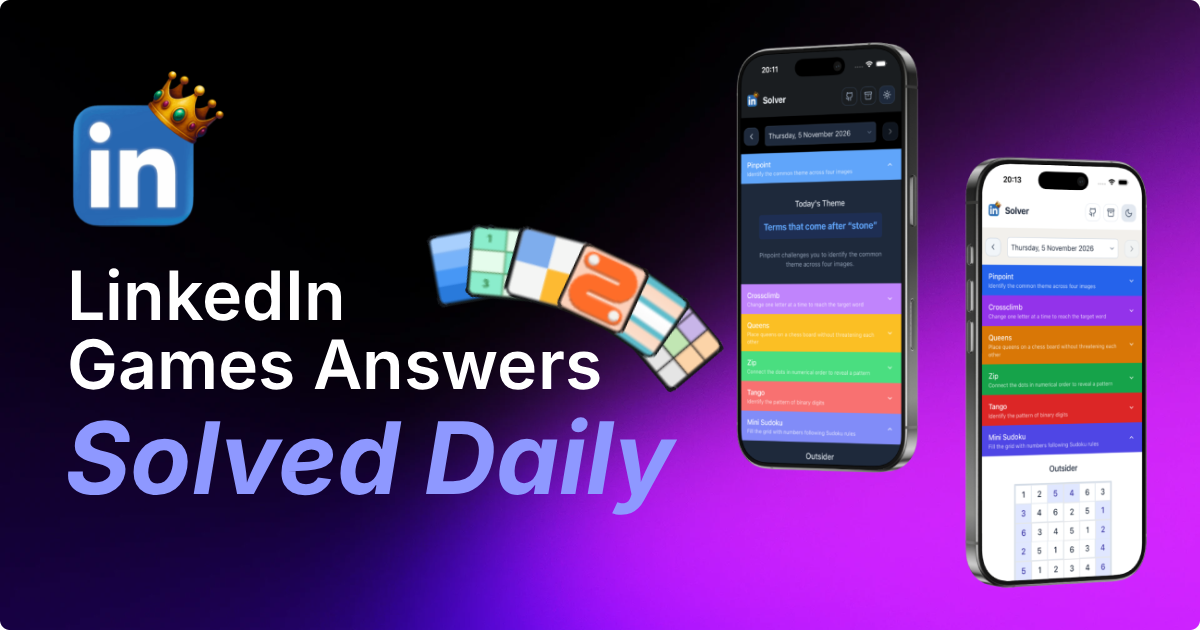
<style>
.page{position:relative;width:1200px;height:630px}
.page>*{position:absolute;margin:0}
.t1{font:68px "Inter-SemiBold";color:#ffffff}
.t2{font:100px "Inter-BoldItalic";color:#8e98ff}
</style>
<div class="page">
<p class="t1" style="left:70px;top:268px;width:530px;height:122px">LinkedIn<br>Games Answers</p>
<p class="t2" style="left:67px;top:417px;width:611px;height:98px">Solved Daily</p>
</div>
